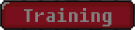
<style>
.page{position:relative;width:135px;height:30px;background:#770f1c}
.page>*{position:absolute;margin:0}
.t1{font:18px "Fixedsys";color:#7f7f7f}
</style>
<div class="page">
<p class="t1" style="left:24px;top:8px;width:88px;height:19px">Training</p>
</div>
